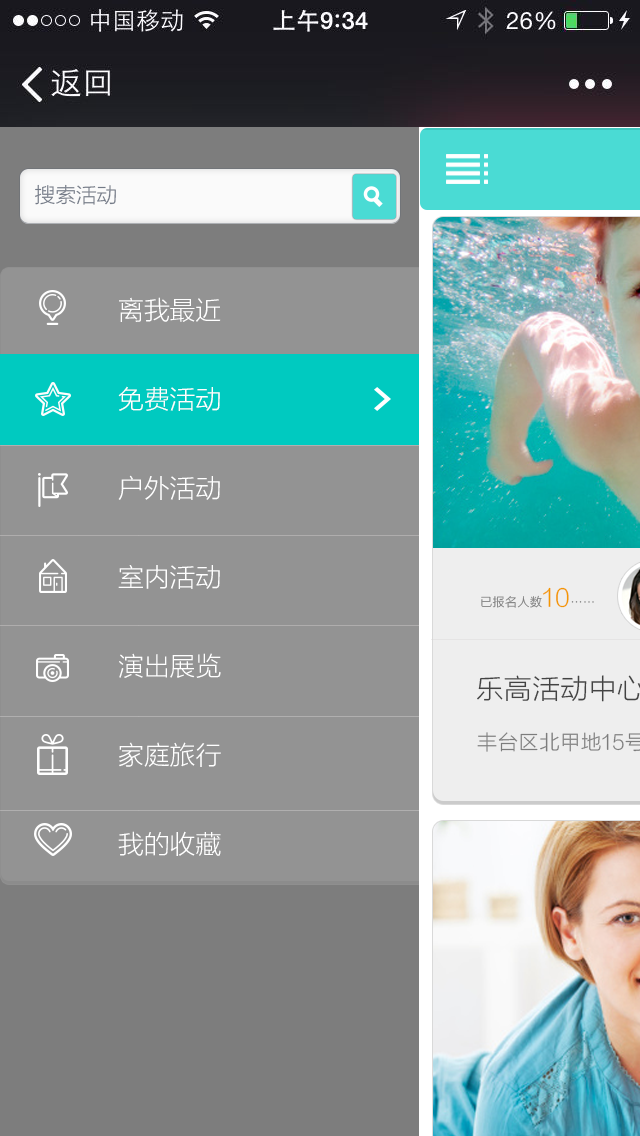
<style>
.page{position:relative;width:640px;height:1136px;background:#939393}
.page>*{position:absolute;margin:0}
.t1{font:20.6px "FZLTXHK--GBK1-0";color:#737a87}
.t2{font:25.9px/88.9px "FZLTXHK--GBK1-0";color:#ffffff}
</style>
<div class="page">
<p class="t1" style="left:35px;top:184px;width:81px;height:21px">搜索活动</p>
<p class="t2" style="left:118px;top:297px;width:103px;height:559px">离我最近<br>免费活动<br>户外活动<br>室内活动<br>演出展览<br>家庭旅行<br>我的收藏</p>
</div>
